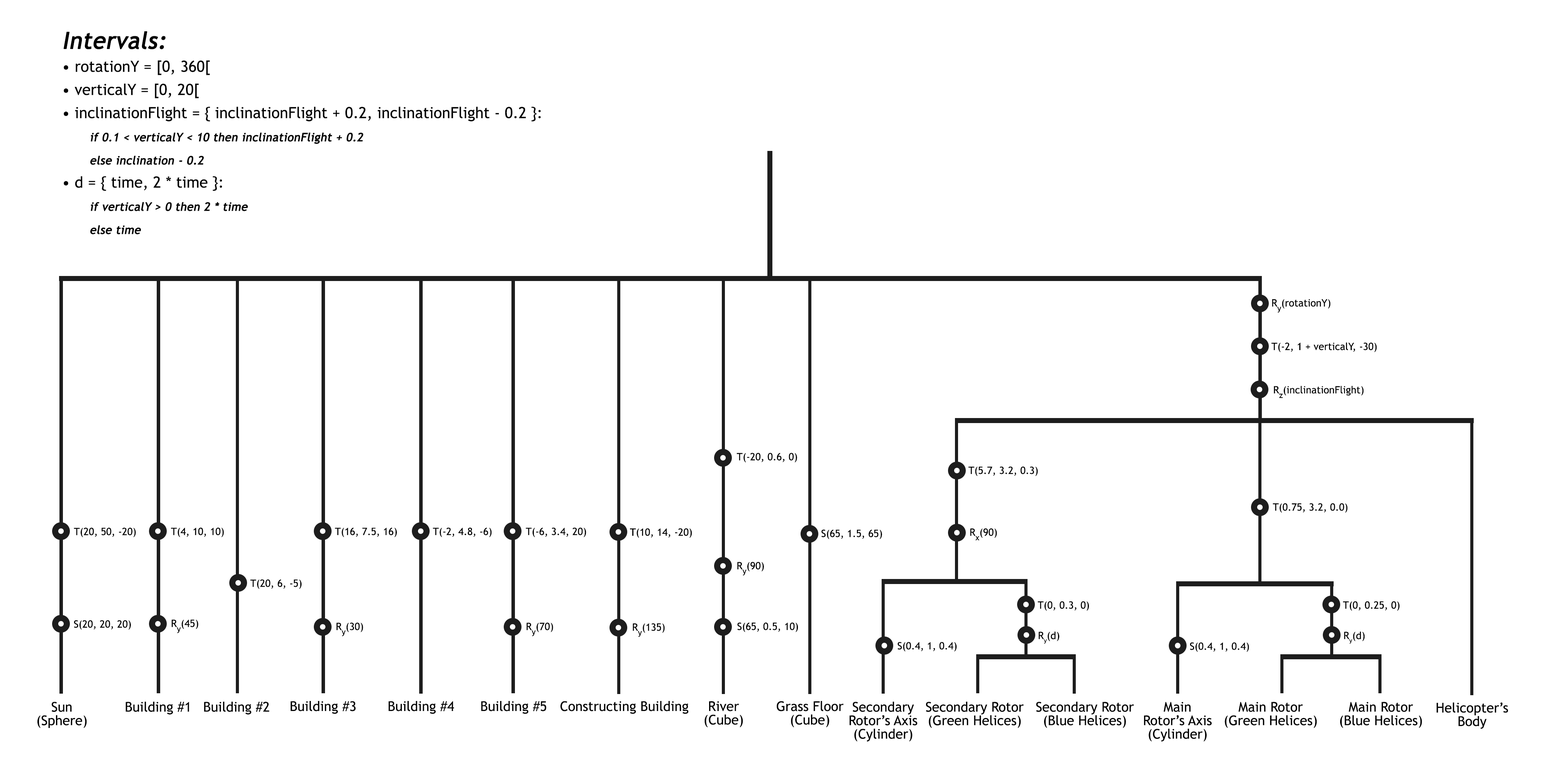
<style>
.page{position:relative;width:1544px;height:772px;background:#ffffff}
.page>*{position:absolute;margin:0}
.t1{font:15.4px/23.2px "TrebuchetMS";color:#000000}
.t2{font:23.2px/23.2px "TrebuchetMS";color:#000000;font-weight:bold;font-style:italic}
.t3{font:11.6px/23.2px "TrebuchetMS";color:#000000;font-weight:bold;font-style:italic}
.t4{font:10.1px "TrebuchetMS";color:#000000}
.t5{font:13.5px "TrebuchetMS";color:#000000}
.t6{font:13.5px/13.5px "TrebuchetMS";color:#000000}
</style>
<div class="page">
<p class="t1" style="left:63px;top:31px;width:478px;height:203px"><span class="t2">Intervals:<br></span>• rotationY = [0, 360[    <br>• verticalY = [0, 20[    <br>• inclinationFlight = { inclinationFlight + 0.2, inclinationFlight - 0.2 }: <br><span class="t3">  if 0.1 &lt; verticalY &lt; 10 then inclinationFlight + 0.2<br>  else inclination - 0.2</span><br>• d = { time, 2 * time }:<br><span class="t3">  if verticalY &gt; 0 then 2 * time<br>  else time</span></p>
<p class="t4" style="left:1272px;top:299px;width:59px;height:14px">R<span class="t5">y</span>(rotationY)</p>
<p class="t4" style="left:1272px;top:342px;width:105px;height:10px">T(-2, 1 + verticalY, -30)</p>
<p class="t4" style="left:1274px;top:386px;width:90px;height:12px">R<span class="t5">z</span>(inclinationFlight)</p>
<p class="t4" style="left:737px;top:453px;width:60px;height:10px">T(-20, 0.6, 0)</p>
<p class="t4" style="left:969px;top:466px;width:69px;height:10px">T(5.7, 3.2, 0.3)</p>
<p class="t4" style="left:1273px;top:503px;width:75px;height:10px">T(0.75, 3.2, 0.0)</p>
<p class="t4" style="left:74px;top:528px;width:62px;height:9px">T(20, 50, -20)</p>
<p class="t4" style="left:171px;top:528px;width:53px;height:9px">T(4, 10, 10)</p>
<p class="t4" style="left:335px;top:528px;width:62px;height:9px">T(16, 7.5, 16)</p>
<p class="t4" style="left:433px;top:528px;width:59px;height:9px">T(-2, 4.8, -6)</p>
<p class="t4" style="left:526px;top:528px;width:60px;height:9px">T(-6, 3.4, 20)</p>
<p class="t4" style="left:630px;top:528px;width:62px;height:10px">T(10, 14, -20)</p>
<p class="t4" style="left:822px;top:530px;width:60px;height:9px">S(65, 1.5, 65)</p>
<p class="t4" style="left:970px;top:528px;width:27px;height:13px">R<span class="t5">x</span>(90)</p>
<p class="t4" style="left:737px;top:562px;width:27px;height:14px">R<span class="t5">y</span>(90)</p>
<p class="t4" style="left:250px;top:579px;width:52px;height:10px">T(20, 6, -5)</p>
<p class="t4" style="left:1038px;top:601px;width:51px;height:10px">T(0, 0.3, 0)</p>
<p class="t4" style="left:1343px;top:601px;width:57px;height:10px">T(0, 0.25, 0)</p>
<p class="t4" style="left:74px;top:620px;width:57px;height:10px">S(20, 20, 20)</p>
<p class="t4" style="left:171px;top:620px;width:27px;height:14px">R<span class="t5">y</span>(45)</p>
<p class="t4" style="left:336px;top:623px;width:27px;height:14px">R<span class="t5">y</span>(30)</p>
<p class="t4" style="left:527px;top:623px;width:26px;height:14px">R<span class="t5">y</span>(70)</p>
<p class="t4" style="left:633px;top:623px;width:32px;height:14px">R<span class="t5">y</span>(135)</p>
<p class="t4" style="left:737px;top:622px;width:61px;height:10px">S(65, 0.5, 10)</p>
<p class="t4" style="left:1039px;top:632px;width:21px;height:12px">Ry(d)</p>
<p class="t4" style="left:1344px;top:632px;width:21px;height:12px">Ry(d)</p>
<p class="t4" style="left:898px;top:642px;width:59px;height:10px">S(0.4, 1, 0.4)</p>
<p class="t4" style="left:1190px;top:642px;width:59px;height:10px">S(0.4, 1, 0.4)</p>
<p class="t6" style="left:37px;top:702px;width:50px;height:27px;text-align:center">Sun<br>(Sphere)</p>
<p class="t5" style="left:125px;top:701px;width:64px;height:14px">Building #1</p>
<p class="t5" style="left:204px;top:701px;width:65px;height:14px">Building #2</p>
<p class="t5" style="left:291px;top:701px;width:65px;height:13px">Building #3</p>
<p class="t5" style="left:388px;top:701px;width:66px;height:13px">Building #4</p>
<p class="t5" style="left:481px;top:701px;width:65px;height:13px">Building #5</p>
<p class="t5" style="left:561px;top:701px;width:128px;height:13px">Constructing Building</p>
<p class="t6" style="left:705px;top:701px;width:38px;height:27px;text-align:center">River<br>(Cube)</p>
<p class="t6" style="left:777px;top:701px;width:67px;height:27px;text-align:center">Grass Floor<br>(Cube)</p>
<p class="t6" style="left:850px;top:701px;width:68px;height:41px;text-align:center">Secondary Rotor’s Axis <br>(Cylinder)</p>
<p class="t6" style="left:926px;top:701px;width:98px;height:28px;text-align:center">Secondary Rotor (Green Helices)</p>
<p class="t6" style="left:1036px;top:701px;width:98px;height:28px;text-align:center">Secondary Rotor (Blue Helices)</p>
<p class="t6" style="left:1144px;top:702px;width:68px;height:40px;text-align:center">Main<br>Rotor’s Axis <br>(Cylinder)</p>
<p class="t6" style="left:1225px;top:702px;width:92px;height:27px;text-align:center">Main Rotor (Green Helices)</p>
<p class="t6" style="left:1340px;top:702px;width:82px;height:27px;text-align:center">Main Rotor (Blue Helices)</p>
<p class="t6" style="left:1437px;top:703px;width:71px;height:26px;text-align:center">Helicopter’s Body</p>
</div>
